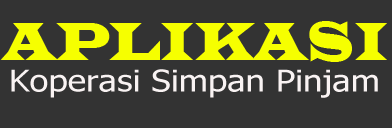
<style>
.page{position:relative;width:392px;height:128px;background:#333333}
.page>*{position:absolute;margin:0}
.t1{font:55px "LatinWide";color:#f6ff00;scale:0.71 1}
.t2{font:30px "Tahoma";color:#f9f3f3;scale:1.16 1}
</style>
<div class="page">
<p class="t1" style="left:0px;top:21px;width:387px;height:41px">APLIKASI</p>
<p class="t2" style="left:11px;top:69px;width:367px;height:29px">Koperasi Simpan Pinjam</p>
</div>
